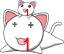
<style>
.page{position:relative;width:64px;height:54px;background:#ffffff}
.page>*{position:absolute;margin:0}
.t1{font:10px "ArialMT";color:#ff0000}
.t2{font:11px "Chick";color:#666666}
.t3{font:12px "Chick";color:#666666}
.t4{font:18px "ArialMT";color:#ff0000}
</style>
<div class="page">
<p class="t1" style="left:25px;top:9px;width:4px;height:7px">1</p>
<p class="t2" style="left:12px;top:22px;width:6px;height:5px">+</p>
<p class="t3" style="left:28px;top:22px;width:6px;height:6px">+</p>
<p class="t4" style="left:23px;top:38px;width:6px;height:13px">1</p>
</div>
